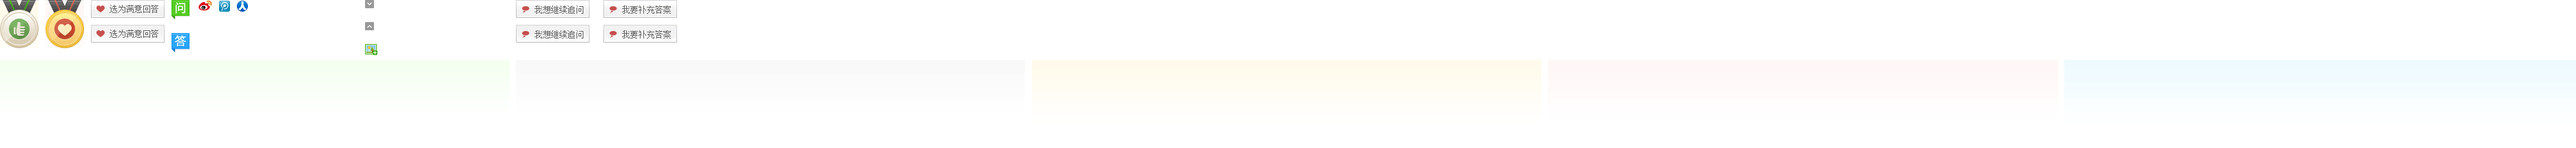
<style>
.page{position:relative;width:2576px;height:148px;background:#ffffff}
.page>*{position:absolute;margin:0}
.t1{font:8.3px "SimSun";color:#646464}
</style>
<div class="page">
<p class="t1" style="left:534px;top:6px;width:49px;height:8px">我想继续追问</p>
<p class="t1" style="left:622px;top:6px;width:49px;height:8px">我要补充答案</p>
<p class="t1" style="left:534px;top:30px;width:49px;height:9px">我想继续追问</p>
<p class="t1" style="left:622px;top:30px;width:49px;height:9px">我要补充答案</p>
</div>
